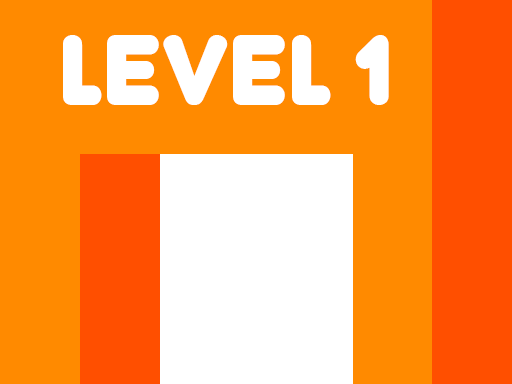
<style>
.page{position:relative;width:512px;height:384px;background:#ff8a00}
.page>*{position:absolute;margin:0}
.t1{font:99px "Junegull-Regular";color:#ffffff}
</style>
<div class="page">
<p class="t1" style="left:63px;top:35px;width:326px;height:70px">LEVEL 1</p>
</div>
